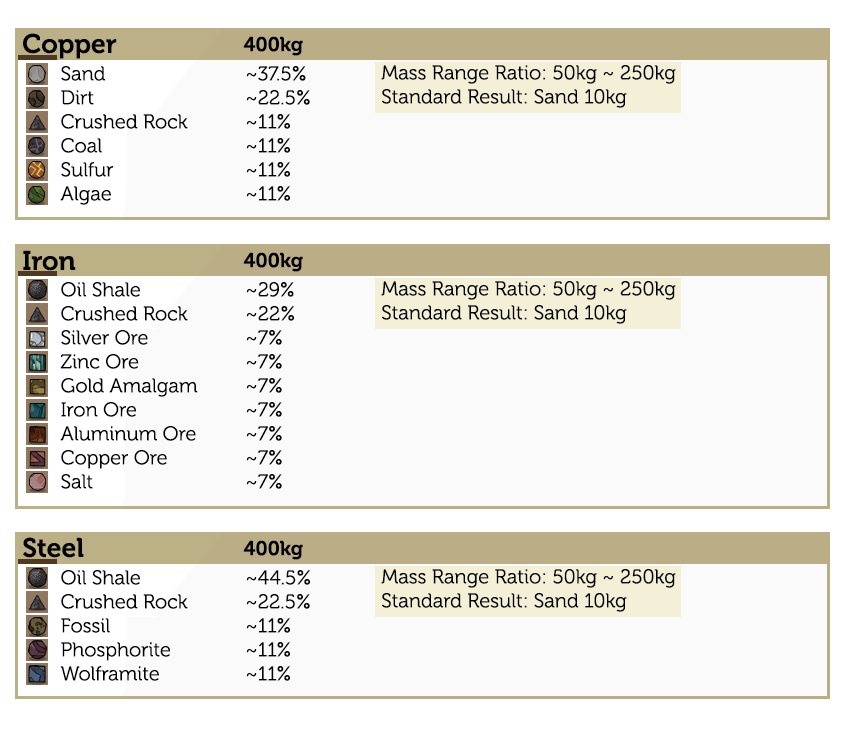
<style>
.page{position:relative;width:848px;height:748px;background:#fafafa}
.page>*{position:absolute;margin:0}
.t1{font:26.7px "Museo-700";color:#010100}
.t2{font:12px "Museo-700";color:#000000}
.t3{font:20px "Museo-300";color:#000000}
</style>
<div class="page">
<p class="t1" style="left:23px;top:33px;width:94px;height:26px">Copper</p>
<p class="t2" style="left:243px;top:36px;width:60px;height:524px">400kg<br><br><br><br><br><br><br><br><br>     400kg<br><br><br><br><br><br><br><br><br><br><br><br>     400kg</p>
<p class="t3" style="left:60px;top:66px;width:138px;height:615px">Sand<br>Dirt<br>Crushed Rock<br>Coal<br>Sulfur<br>Algae<br><br><br><br>Oil Shale<br>Crushed Rock<br>Silver Ore<br>Zinc Ore<br>Gold Amalgam<br>Iron Ore<br>Aluminum Ore<br>Copper Ore<br>Salt<br><br><br><br>Oil Shale<br>Crushed Rock<br>Fossil<br>Phosphorite<br>Wolframite</p>
<p class="t3" style="left:246px;top:66px;width:64px;height:615px">~37.5%<br>~22.5%<br>~11%<br>~11%<br>~11%<br>~11%<br><br><br><br>~29%<br>~22%<br>~7%<br>~7%<br>~7%<br>~7%<br>~7%<br>~7%<br>~7%<br><br><br><br>~44.5%<br>~22.5%<br>~11%<br>~11%<br>~11%</p>
<p class="t1" style="left:23px;top:250px;width:53px;height:21px">Iron</p>
<p class="t1" style="left:23px;top:537px;width:61px;height:21px">Steel</p>
</div>
